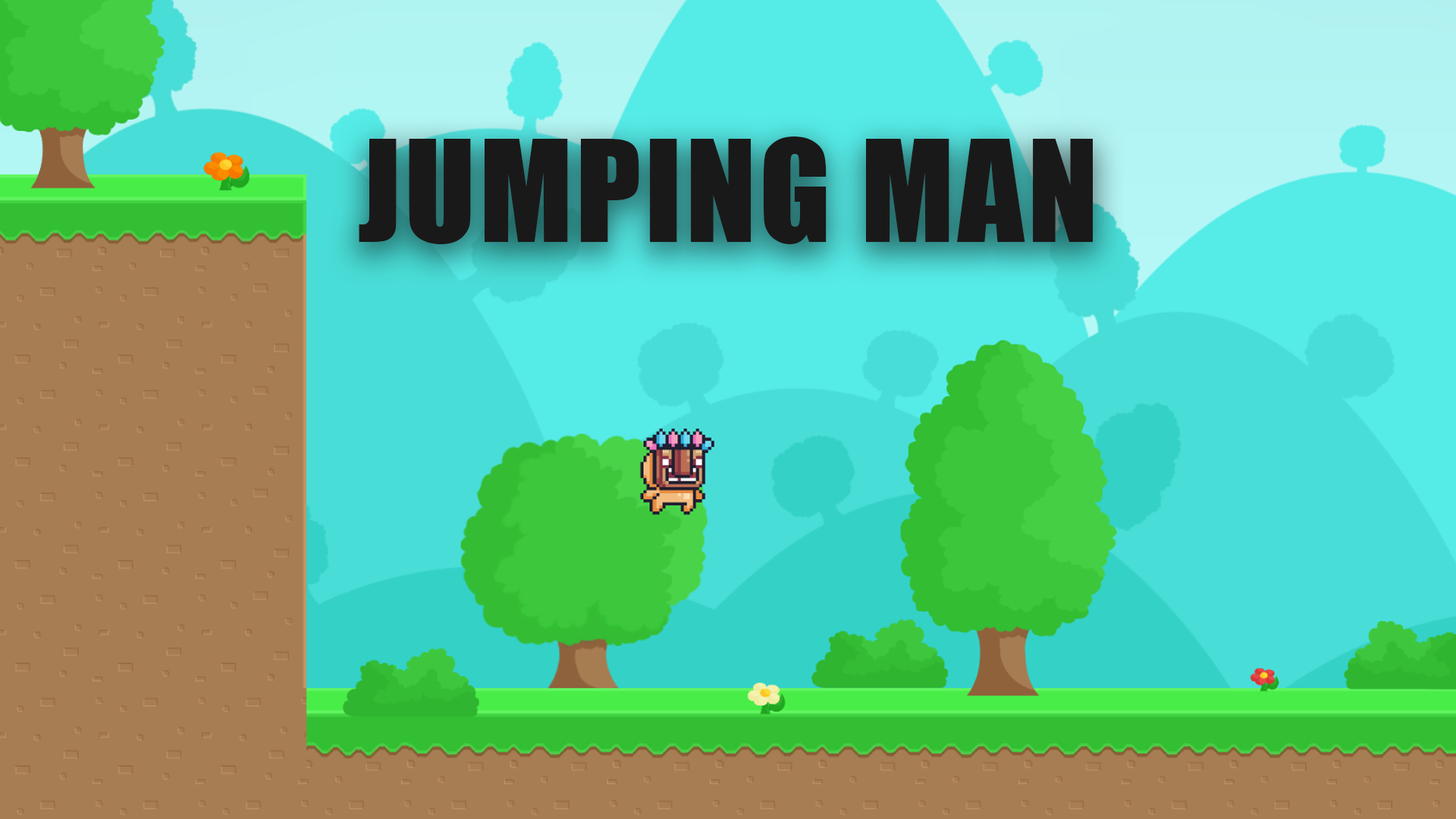
<style>
.page{position:relative;width:1456px;height:819px}
.page>*{position:absolute;margin:0}
.t1{font:130.6px "Impact";letter-spacing:0.025em;color:#1a1919}
</style>
<div class="page">
<p class="t1" style="left:359px;top:136px;width:734px;height:108px">JUMPING MAN</p>
</div>
